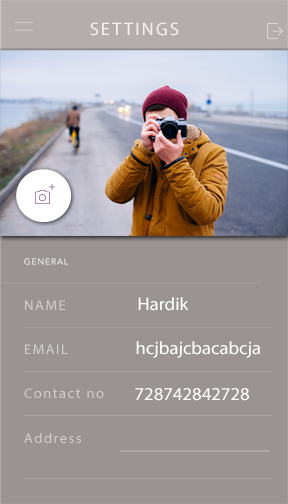
<style>
.page{position:relative;width:288px;height:504px;background:#9a9393}
.page>*{position:absolute;margin:0}
.t1{font:18px "MyriadPro-Regular";letter-spacing:0.1em;color:#f6f1f1;scale:1.04 1}
.t2{font:8.3px "Avenir-Book";letter-spacing:0.1em;color:#ffffff;scale:1.04 1}
.t3{font:14px "MyriadPro-Regular";letter-spacing:0.1em;color:#d1cece;scale:1.04 1}
.t4{font:18px "MyriadPro-Regular";color:#ffffff;scale:1.04 1}
</style>
<div class="page">
<p class="t1" style="left:90px;top:22px;width:89px;height:14px">SETTINGS</p>
<p class="t2" style="left:24px;top:258px;width:44px;height:7px">GENERAL</p>
<p class="t3" style="left:25px;top:300px;width:40px;height:10px">NAME</p>
<p class="t4" style="left:138px;top:297px;width:51px;height:14px">Hardik</p>
<p class="t4" style="left:136px;top:341px;width:124px;height:17px">hcjbajcbacabcja</p>
<p class="t3" style="left:25px;top:344px;width:43px;height:10px">EMAIL</p>
<p class="t3" style="left:24px;top:388px;width:80px;height:10px">Contact no</p>
<p class="t4" style="left:135px;top:388px;width:114px;height:13px">728742842728</p>
<p class="t3" style="left:24px;top:433px;width:57px;height:10px">Address</p>
</div>
